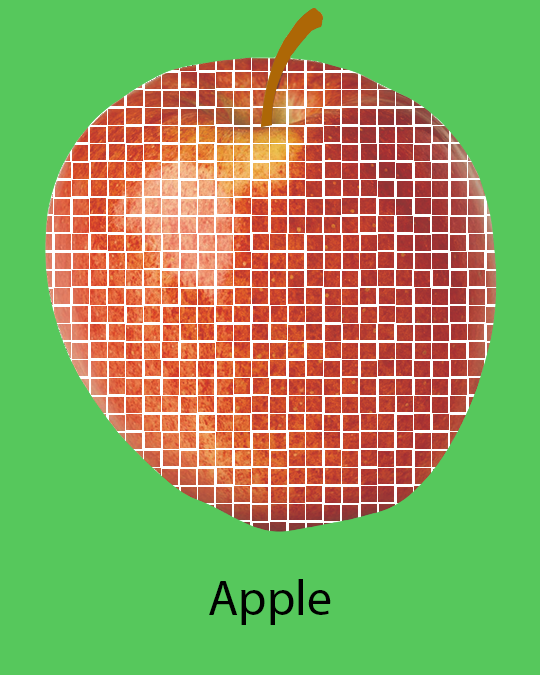
<style>
.page{position:relative;width:540px;height:675px;background:#56c85c}
.page>*{position:absolute;margin:0}
.t1{font:50px "MyriadPro-Regular";color:#000000}
</style>
<div class="page">
<p class="t1" style="left:209px;top:579px;width:122px;height:46px">Apple</p>
</div>
